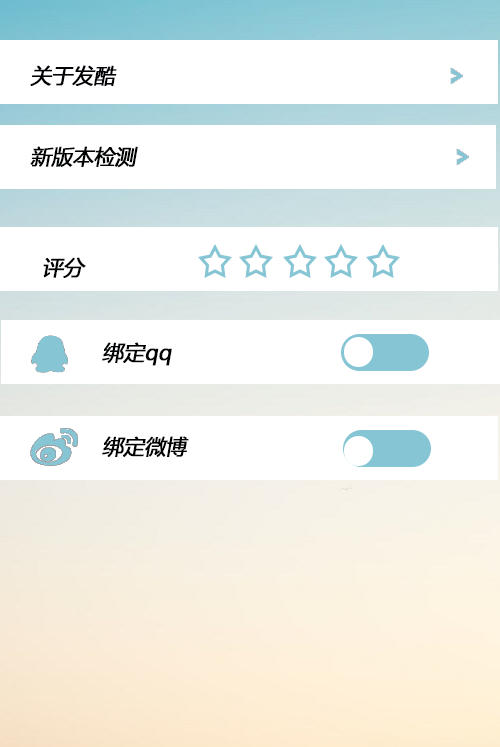
<style>
.page{position:relative;width:500px;height:747px;background:#ffffff}
.page>*{position:absolute;margin:0}
.t1{font:36px "MicrosoftYaHei";letter-spacing:-0.025em;color:#010005;font-weight:bold;font-style:italic}
.t2{font:36px "MicrosoftYaHei";letter-spacing:-0.025em;color:#000203;font-weight:bold;font-style:italic}
.t3{font:36px "MicrosoftYaHei";letter-spacing:-0.025em;color:#000000;font-weight:bold;font-style:italic}
</style>
<div class="page">
<p class="t1" style="left:30px;top:65px;width:87px;height:21px">关于发酷</p>
<p class="t2" style="left:30px;top:146px;width:108px;height:22px">新版本检测</p>
<p class="t2" style="left:43px;top:257px;width:43px;height:21px">评分</p>
<p class="t2" style="left:102px;top:342px;width:70px;height:24px">绑定qq</p>
<p class="t3" style="left:102px;top:436px;width:87px;height:21px">绑定微博</p>
</div>
